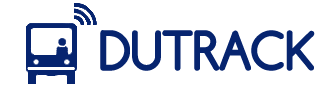
<style>
.page{position:relative;width:324px;height:90px;background:#ffffff}
.page>*{position:absolute;margin:0}
.t1{font:55px "Comfortaa-Bold";color:#06246f}
</style>
<div class="page">
<p class="t1" style="left:100px;top:30px;width:215px;height:41px">DUTRACK</p>
</div>
